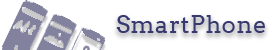
<style>
.page{position:relative;width:273px;height:50px;background:#ffffff}
.page>*{position:absolute;margin:0}
.t1{font:24px "Arvo";letter-spacing:0.02em;color:#37396f}
</style>
<div class="page">
<p class="t1" style="left:116px;top:15px;width:149px;height:18px">SmartPhone</p>
</div>
